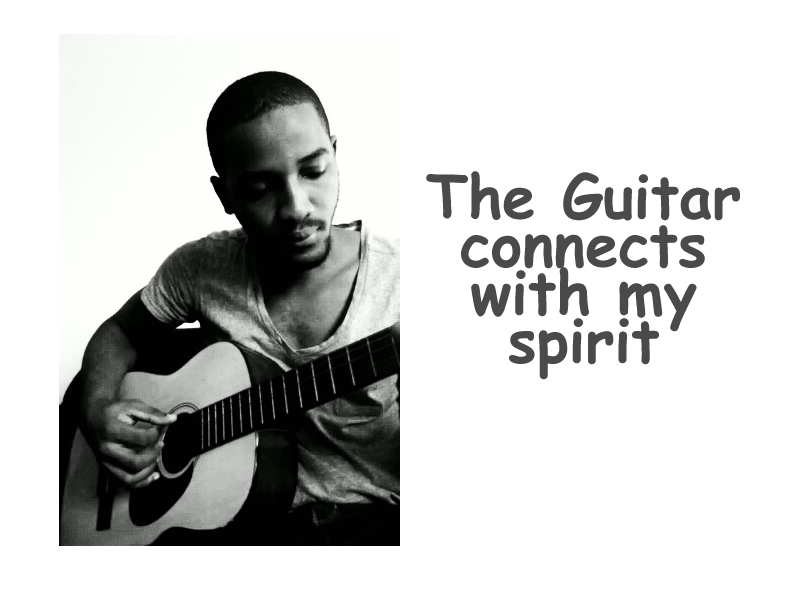
<style>
.page{position:relative;width:800px;height:600px;background:#ffffff}
.page>*{position:absolute;margin:0}
.t1{font:60px/48px "ComicSansMS-Bold";color:#4b4949}
</style>
<div class="page">
<p class="t1" style="left:426px;top:171px;width:314px;height:209px;text-align:center">The Guitar connects with my<br>spirit</p>
</div>
